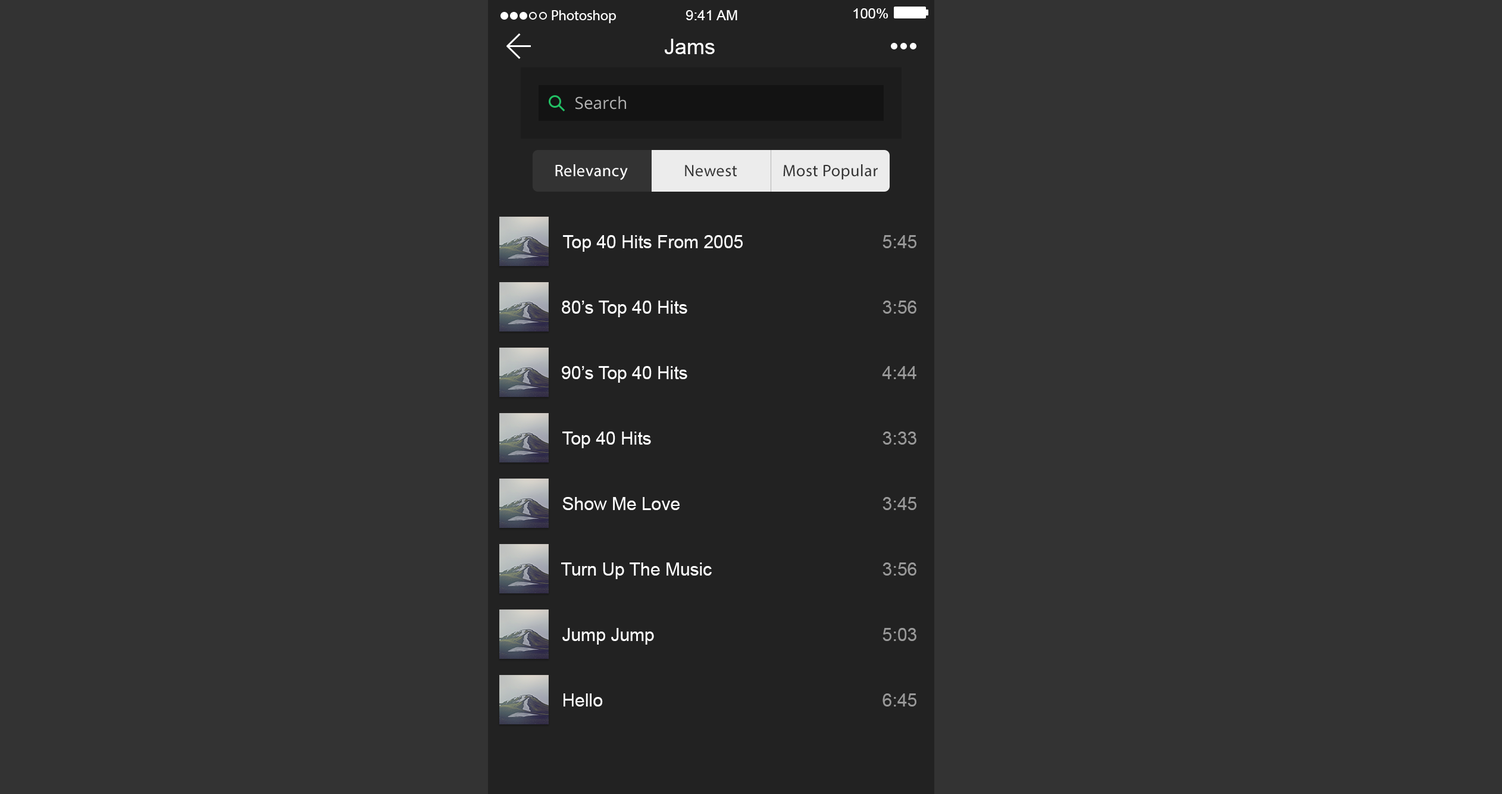
<style>
.page{position:relative;width:1502px;height:794px;background:#333333}
.page>*{position:absolute;margin:0}
.t1{font:14.3px "MyriadPro-Regular";color:#ffffff}
.t2{font:14.3px "ArialMT";color:#ffffff}
.t3{font:21.4px "ArialMT";color:#ffffff}
.t4{font:17.9px "ArialMT";color:#ffffff}
.t5{font:17.9px "ArialMT";color:#999999}
</style>
<div class="page">
<p class="t1" style="left:552px;top:10px;width:64px;height:13px">Photoshop</p>
<p class="t2" style="left:686px;top:10px;width:51px;height:10px">9:41 AM</p>
<p class="t2" style="left:853px;top:8px;width:35px;height:10px">100%</p>
<p class="t3" style="left:664px;top:39px;width:51px;height:15px">Jams</p>
<p class="t4" style="left:563px;top:235px;width:180px;height:17px">Top 40 Hits From 2005</p>
<p class="t5" style="left:883px;top:235px;width:33px;height:13px">5:45</p>
<p class="t4" style="left:562px;top:301px;width:125px;height:16px">80’s Top 40 Hits</p>
<p class="t5" style="left:883px;top:301px;width:33px;height:13px">3:56</p>
<p class="t4" style="left:562px;top:366px;width:125px;height:17px">90’s Top 40 Hits</p>
<p class="t5" style="left:882px;top:366px;width:34px;height:13px">4:44</p>
<p class="t4" style="left:562px;top:431px;width:89px;height:17px">Top 40 Hits</p>
<p class="t5" style="left:883px;top:431px;width:33px;height:14px">3:33</p>
<p class="t4" style="left:562px;top:497px;width:118px;height:13px">Show Me Love</p>
<p class="t5" style="left:883px;top:497px;width:33px;height:13px">3:45</p>
<p class="t4" style="left:561px;top:562px;width:151px;height:17px">Turn Up The Music</p>
<p class="t5" style="left:883px;top:562px;width:33px;height:13px">3:56</p>
<p class="t4" style="left:562px;top:628px;width:92px;height:16px">Jump Jump</p>
<p class="t5" style="left:883px;top:628px;width:33px;height:13px">5:03</p>
<p class="t4" style="left:564px;top:693px;width:39px;height:13px">Hello</p>
<p class="t5" style="left:883px;top:693px;width:33px;height:13px">6:45</p>
</div>
